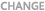
<style>
.page{position:relative;width:45px;height:11px;background:#ffffff}
.page>*{position:absolute;margin:0}
.t1{font:10px "MicrosoftYaHei";color:#a0a0a0;font-weight:bold}
</style>
<div class="page">
<p class="t1" style="left:0px;top:1px;width:45px;height:9px">CHANGE</p>
</div>
